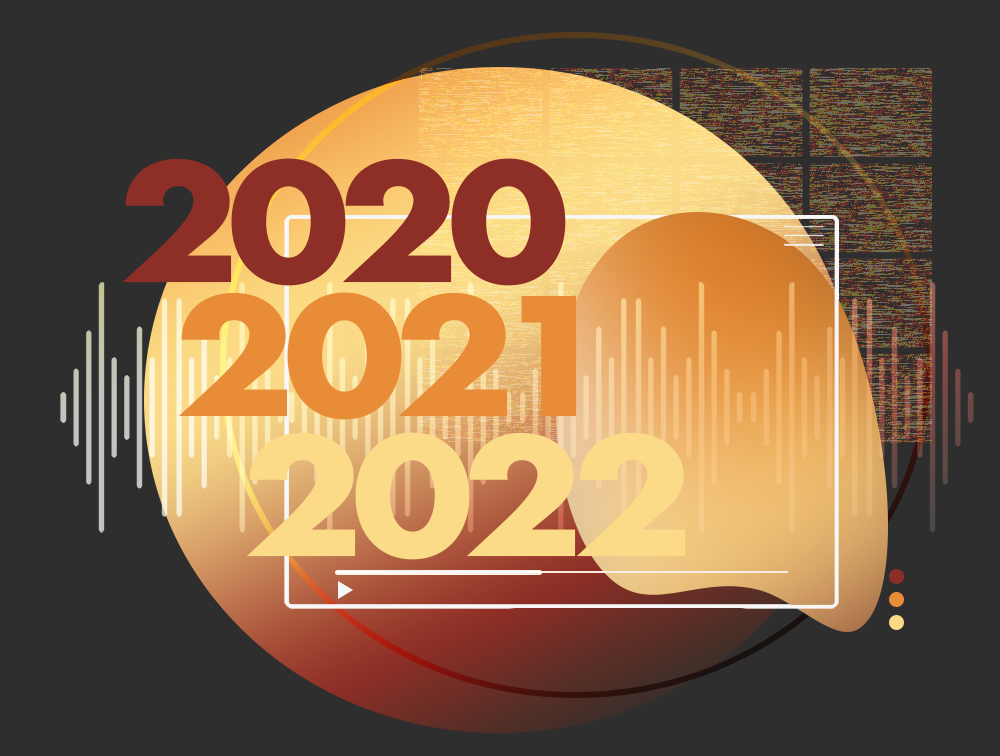
<style>
.page{position:relative;width:1000px;height:756px;background:#2e2e2e}
.page>*{position:absolute;margin:0}
.t1{font:158.9px "Futura-Bold";letter-spacing:-0.06em;color:#8d2f26;scale:1.12 1}
.t2{font:158.9px "Futura-Bold";letter-spacing:-0.06em;color:#e98c38;scale:1.12 1}
.t3{font:158.9px "Futura-Bold";letter-spacing:-0.06em;color:#fbdb88;scale:1.12 1}
</style>
<div class="page">
<p class="t1" style="left:122px;top:158px;width:444px;height:128px">2020</p>
<p class="t2" style="left:178px;top:292px;width:399px;height:128px">2021</p>
<p class="t3" style="left:246px;top:432px;width:440px;height:128px">2022</p>
</div>
